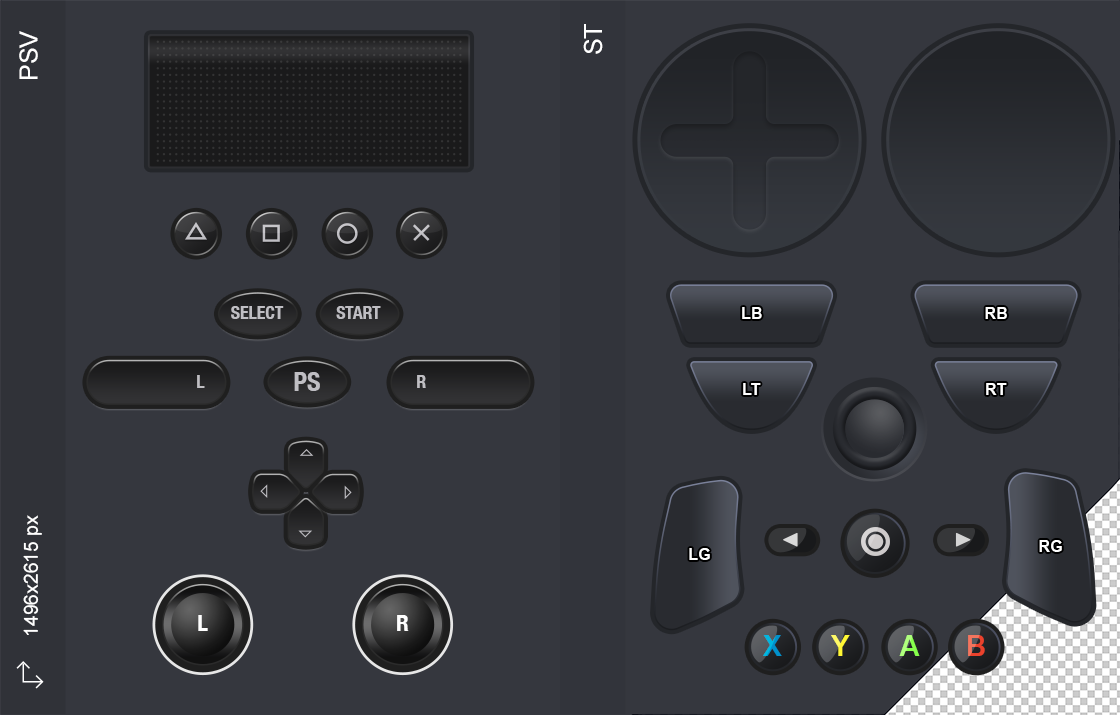
<style>
.page{position:relative;width:1120px;height:715px;background:#35373e}
.page>*{position:absolute;margin:0}
.t1{font:25px "ArialMT";color:#ffffff}
.t2{font:17.8px "HelveticaNeue-CondensedBold";color:#bfbec3}
.t3{font:16.3px "Arial-BoldMT";color:#ffffff}
.t4{font:25.6px "HelveticaNeue-CondensedBold";color:#bfbec3}
.t5{font:19.6px "ArialMT";color:#ffffff}
.t6{font:23px "HelveticaNeue-CondensedBold";color:#ffffff}
.t7{font:28.6px "Arial-BoldMT"}
.t8{font:28.6px "Arial-BoldMT";color:#fff734}
</style>
<div class="page">
<p class="t1" style="left:583px;top:24px;width:20px;height:30px;rotate:-90deg">ST</p>
<p class="t1" style="left:19px;top:31px;width:19px;height:48px;rotate:-90deg">PSV</p>
<p class="t2" style="left:231px;top:306px;width:53px;height:13px">SELECT</p>
<p class="t2" style="left:336px;top:306px;width:45px;height:13px">START</p>
<p class="t3" style="left:742px;top:307px;width:20px;height:12px">LB</p>
<p class="t3" style="left:985px;top:307px;width:22px;height:12px">RB</p>
<p class="t2" style="left:197px;top:375px;width:8px;height:13px">L</p>
<p class="t4" style="left:294px;top:372px;width:26px;height:19px">PS</p>
<p class="t2" style="left:417px;top:375px;width:9px;height:13px">R</p>
<p class="t3" style="left:743px;top:383px;width:18px;height:12px">LT</p>
<p class="t3" style="left:986px;top:383px;width:21px;height:12px">RT</p>
<p class="t5" style="left:23px;top:515px;width:19px;height:120px;rotate:-90deg">1496x2615 px</p>
<p class="t3" style="left:1039px;top:540px;width:23px;height:12px">RG</p>
<p class="t3" style="left:689px;top:548px;width:21px;height:12px">LG</p>
<p class="t6" style="left:198px;top:615px;width:10px;height:16px">L</p>
<p class="t6" style="left:397px;top:615px;width:12px;height:16px">R</p>
<p class="t7" style="left:763px;top:635px;width:19px;height:21px">X</p>
<p class="t8" style="left:831px;top:635px;width:19px;height:21px">Y</p>
<p class="t7" style="left:899px;top:635px;width:21px;height:21px">A</p>
<p class="t7" style="left:968px;top:635px;width:17px;height:21px">B</p>
</div>
